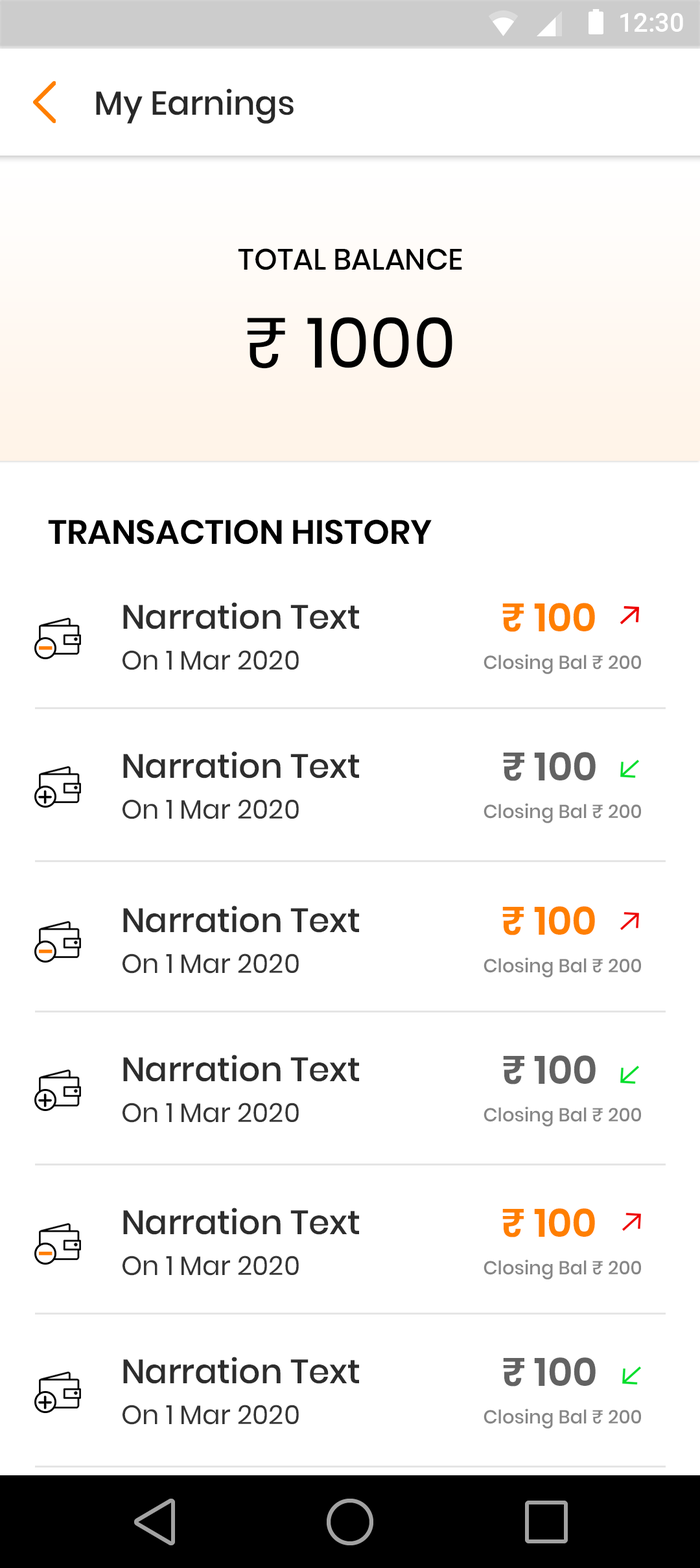
<style>
.page{position:relative;width:700px;height:1568px;background:#ffffff}
.page>*{position:absolute;margin:0}
.t1{font:26.6px "Roboto-Medium";color:#ffffff}
.t2{font:33.3px "Poppins-Medium";color:#282828}
.t3{font:29.4px "Poppins-Medium";color:#000000;text-transform:uppercase}
.t4{font:70.3px "Poppins-Regular";color:#000000;text-transform:uppercase}
.t5{font:33.7px "Poppins-SemiBold";color:#000000;text-transform:uppercase}
.t6{font:33.7px "Poppins-Medium";color:#2d2d2d}
.t7{font:26.6px/40.8px "Poppins-Regular";color:#353535}
.t8{font:39.5px "Poppins-SemiBold";color:#ff7f00}
.t9{font:39.5px "Poppins-SemiBold";letter-spacing:0.08em;color:#ff7f00}
.t10{font:31.3px "Poppins-SemiBold";color:#ff7f00}
.t11{font:18.8px "Poppins-Medium";color:#868686}
.t12{font:39.5px "Poppins-SemiBold";color:#626262}
</style>
<div class="page">
<p class="t1" style="left:620px;top:13px;width:63px;height:19px">12:30</p>
<p class="t2" style="left:96px;top:89px;width:198px;height:35px">My Earnings</p>
<p class="t3" style="left:238px;top:248px;width:224px;height:22px">Total balance</p>
<p class="t4" style="left:247px;top:317px;width:205px;height:52px">₹ 1000</p>
<p class="t5" style="left:48px;top:519px;width:384px;height:25px">transaction History</p>
<p class="t6" style="left:123px;top:602px;width:236px;height:68px;text-align:right">Narration Text<br><span class="t7">On 1 Mar 2020</span></p>
<p class="t8" style="left:502px;top:603px;width:93px;height:29px"><span class="t9"> </span>₹ 100</p>
<p class="t10" style="left:39px;top:646px;width:14px;height:4px">-</p>
<p class="t11" style="left:484px;top:654px;width:157px;height:20px">Closing Bal ₹ 200</p>
<p class="t6" style="left:123px;top:751px;width:236px;height:68px;text-align:right">Narration Text<br><span class="t7">On 1 Mar 2020</span></p>
<p class="t12" style="left:503px;top:752px;width:93px;height:29px">₹ 100</p>
<p class="t11" style="left:484px;top:803px;width:157px;height:20px">Closing Bal ₹ 200</p>
<p class="t6" style="left:123px;top:906px;width:236px;height:68px;text-align:right">Narration Text<br><span class="t7">On 1 Mar 2020</span></p>
<p class="t8" style="left:502px;top:906px;width:93px;height:29px"><span class="t9"> </span>₹ 100</p>
<p class="t10" style="left:39px;top:950px;width:14px;height:4px">-</p>
<p class="t11" style="left:484px;top:957px;width:157px;height:20px">Closing Bal ₹ 200</p>
<p class="t6" style="left:123px;top:1055px;width:236px;height:68px;text-align:right">Narration Text<br><span class="t7">On 1 Mar 2020</span></p>
<p class="t12" style="left:503px;top:1055px;width:93px;height:29px">₹ 100</p>
<p class="t11" style="left:484px;top:1106px;width:157px;height:21px">Closing Bal ₹ 200</p>
<p class="t6" style="left:123px;top:1208px;width:236px;height:68px;text-align:right">Narration Text<br><span class="t7">On 1 Mar 2020</span></p>
<p class="t8" style="left:502px;top:1208px;width:93px;height:29px"><span class="t9"> </span>₹ 100</p>
<p class="t10" style="left:39px;top:1252px;width:14px;height:4px">-</p>
<p class="t11" style="left:484px;top:1259px;width:157px;height:21px">Closing Bal ₹ 200</p>
<p class="t6" style="left:123px;top:1357px;width:236px;height:68px;text-align:right">Narration Text<br><span class="t7">On 1 Mar 2020</span></p>
<p class="t12" style="left:503px;top:1357px;width:93px;height:30px">₹ 100</p>
<p class="t11" style="left:484px;top:1409px;width:157px;height:20px">Closing Bal ₹ 200</p>
</div>
